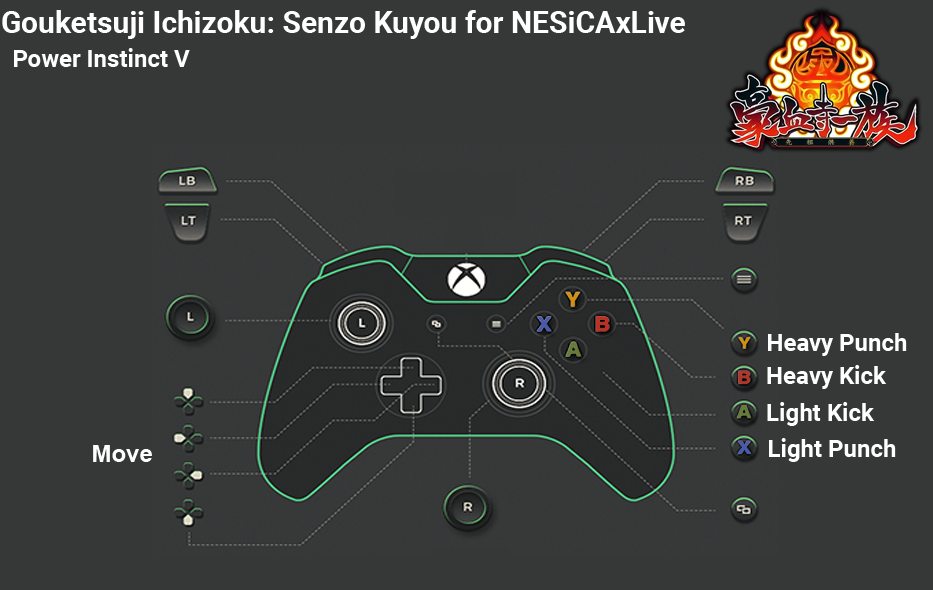
<style>
.page{position:relative;width:933px;height:590px;background:#363838}
.page>*{position:absolute;margin:0}
.t1{font:30px "Roboto-Bold";color:#ffffff}
.t2{font:24px "Roboto-Bold";color:#ffffff}
.t3{font:24px "Arial-BoldMT";color:#fefefe}
</style>
<div class="page">
<p class="t1" style="left:2px;top:10px;width:683px;height:29px">Gouketsuji Ichizoku: Senzo Kuyou for NESiCAxLive</p>
<p class="t2" style="left:14px;top:48px;width:176px;height:19px">Power Instinct V</p>
<p class="t2" style="left:768px;top:333px;width:139px;height:23px">Heavy Punch</p>
<p class="t2" style="left:767px;top:365px;width:120px;height:24px">Heavy Kick</p>
<p class="t2" style="left:767px;top:402px;width:108px;height:24px">Light Kick</p>
<p class="t2" style="left:769px;top:438px;width:127px;height:24px">Light Punch</p>
<p class="t3" style="left:93px;top:445px;width:59px;height:17px">Move</p>
</div>
